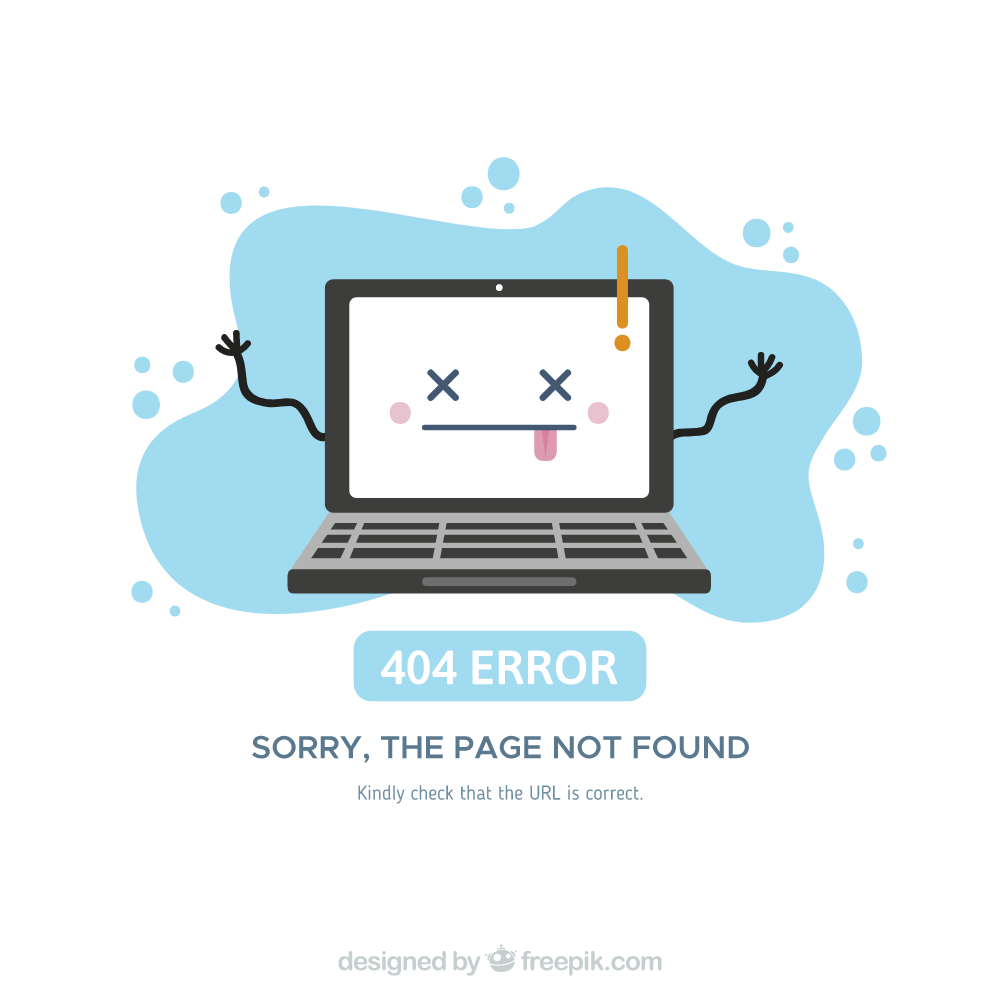
<style>
.page{position:relative;width:1000px;height:1000px;background:#ffffff}
.page>*{position:absolute;margin:0}
.t1{font:48px "Asap-Medium";color:#ffffff}
.t2{font:32px "Metropolis-SemiBold";color:#5a788e}
.t3{font:20px "BloggerSans";color:#7091a4}
</style>
<div class="page">
<p class="t1" style="left:380px;top:650px;width:238px;height:35px">404 ERROR</p>
<p class="t2" style="left:252px;top:735px;width:497px;height:28px">SORRY, THE PAGE NOT FOUND</p>
<p class="t3" style="left:358px;top:785px;width:285px;height:19px">Kindly check that the URL is correct.</p>
</div>
